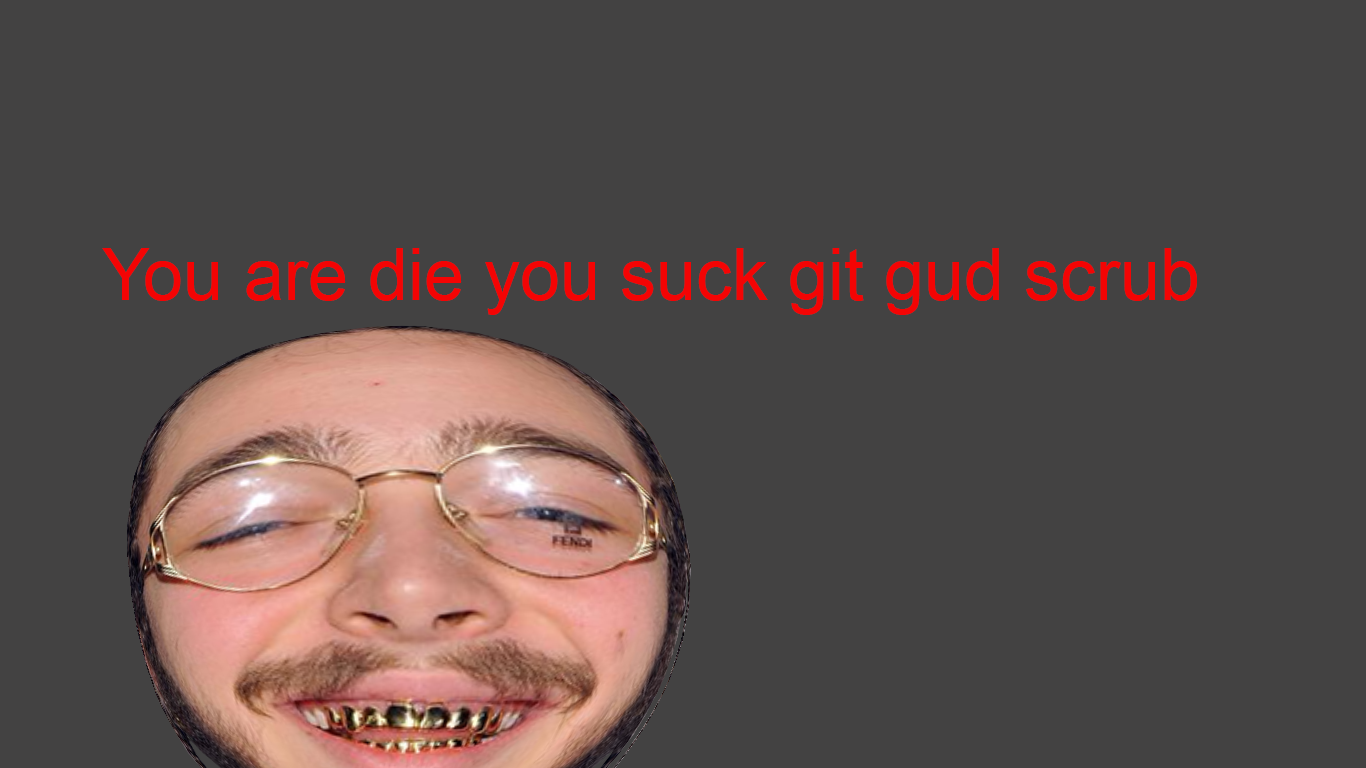
<style>
.page{position:relative;width:1366px;height:768px;background:#434242}
.page>*{position:absolute;margin:0}
.t1{font:72px "ArialMT";color:#f40404}
</style>
<div class="page">
<p class="t1" style="left:102px;top:248px;width:1095px;height:67px">You are die you suck git gud scrub</p>
</div>
